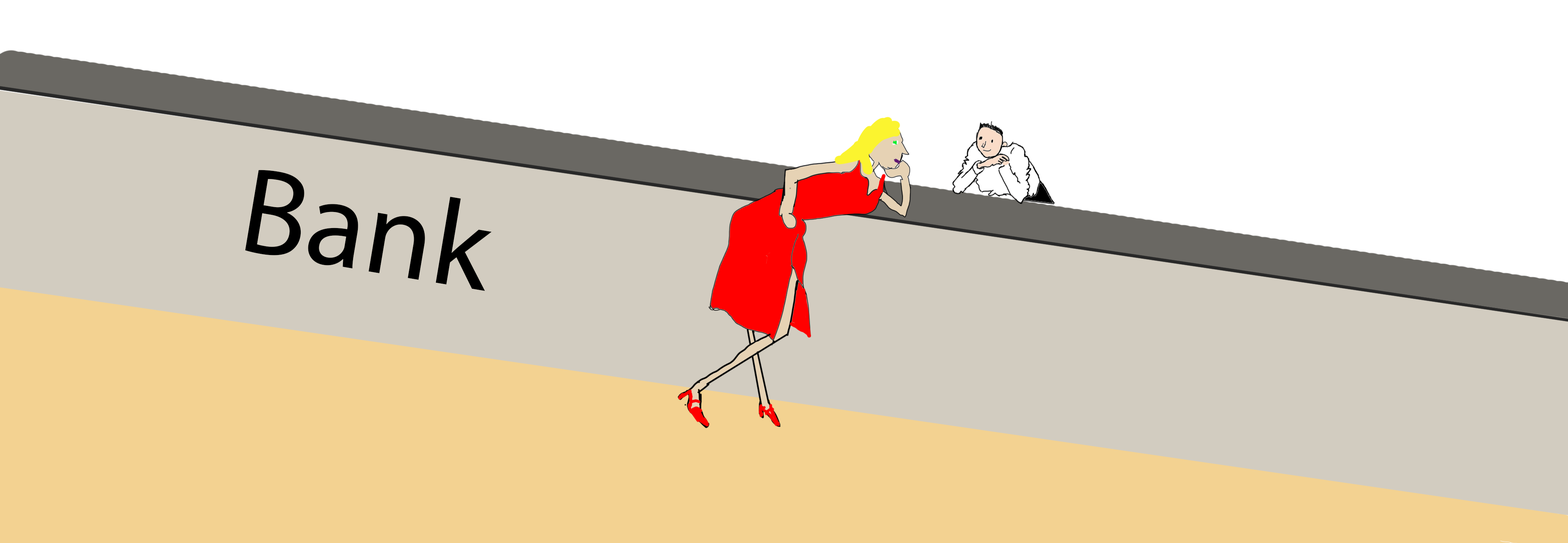
<style>
.page{position:relative;width:1568px;height:543px;background:#d2ccc0}
.page>*{position:absolute;margin:0}
.t1{font:122.5px "MyriadPro-Regular";color:#000000}
</style>
<div class="page">
<p class="t1" style="left:245px;top:170px;width:247px;height:121px;rotate:10deg">Bank</p>
</div>
